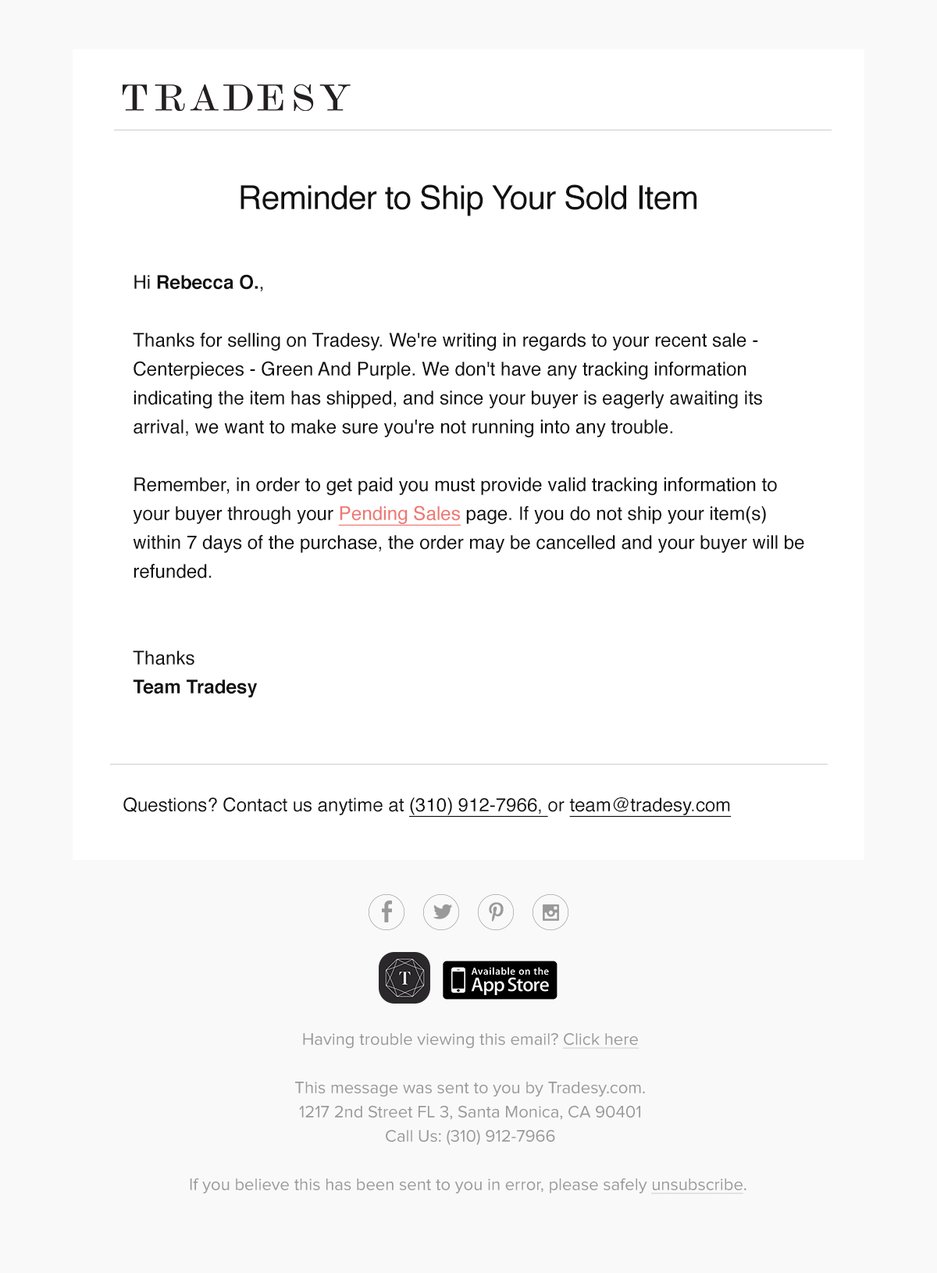
<style>
.page{position:relative;width:937px;height:1273px;background:#ffffff}
.page>*{position:absolute;margin:0}
.t1{font:33.1px "Helvetica";letter-spacing:-0.02em;color:#111111}
.t2{font:18.9px/28.9px "Helvetica";color:#111111}
.t3{font:18.9px/28.9px "Helvetica-Bold";color:#111111}
.t4{font:18.9px/28.9px "Helvetica";color:#ee7873;text-decoration:underline}
.t5{font:18.7px "Helvetica";color:#111111}
.t6{font:18.7px "Helvetica";color:#111111;text-decoration:underline}
.t7{font:17.2px/24.2px "ProximaNova-Regular";color:#999999}
.t8{font:17.2px/24.2px "ProximaNova-Regular";color:#999999;text-decoration:underline}
</style>
<div class="page">
<p class="t1" style="left:240px;top:184px;width:456px;height:32px">Reminder to Ship Your Sold Item</p>
<p class="t2" style="left:133px;top:274px;width:671px;height:423px">Hi <span class="t3">Rebecca O.</span>,<br><br>Thanks for selling on Tradesy. We're writing in regards to your recent sale - Centerpieces - Green And Purple. We don't have any tracking information indicating the item has shipped, and since your buyer is eagerly awaiting its arrival, we want to make sure you're not running into any trouble.<br><br>Remember, in order to get paid you must provide valid tracking information to your buyer through your <span class="t4">Pending Sales</span> page. If you do not ship your item(s) within 7 days of the purchase, the order may be cancelled and your buyer will be refunded.<br><br><br>Thanks<br><span class="t3">Team Tradesy</span></p>
<p class="t5" style="left:123px;top:797px;width:609px;height:20px">Questions? Contact us anytime at <span class="t6">(310) 912-7966, </span>or <span class="t6">team@tradesy.com</span></p>
<p class="t7" style="left:190px;top:1032px;width:556px;height:162px;text-align:center">Having trouble viewing this email? <span class="t8">Click here<br></span><br>This message was sent to you by Tradesy.com.<br>1217 2nd Street FL 3, Santa Monica, CA 90401<br>Call Us: (310) 912-7966<br><br>If you believe this has been sent to you in error, please safely <span class="t8">unsubscribe</span>.</p>
</div>
